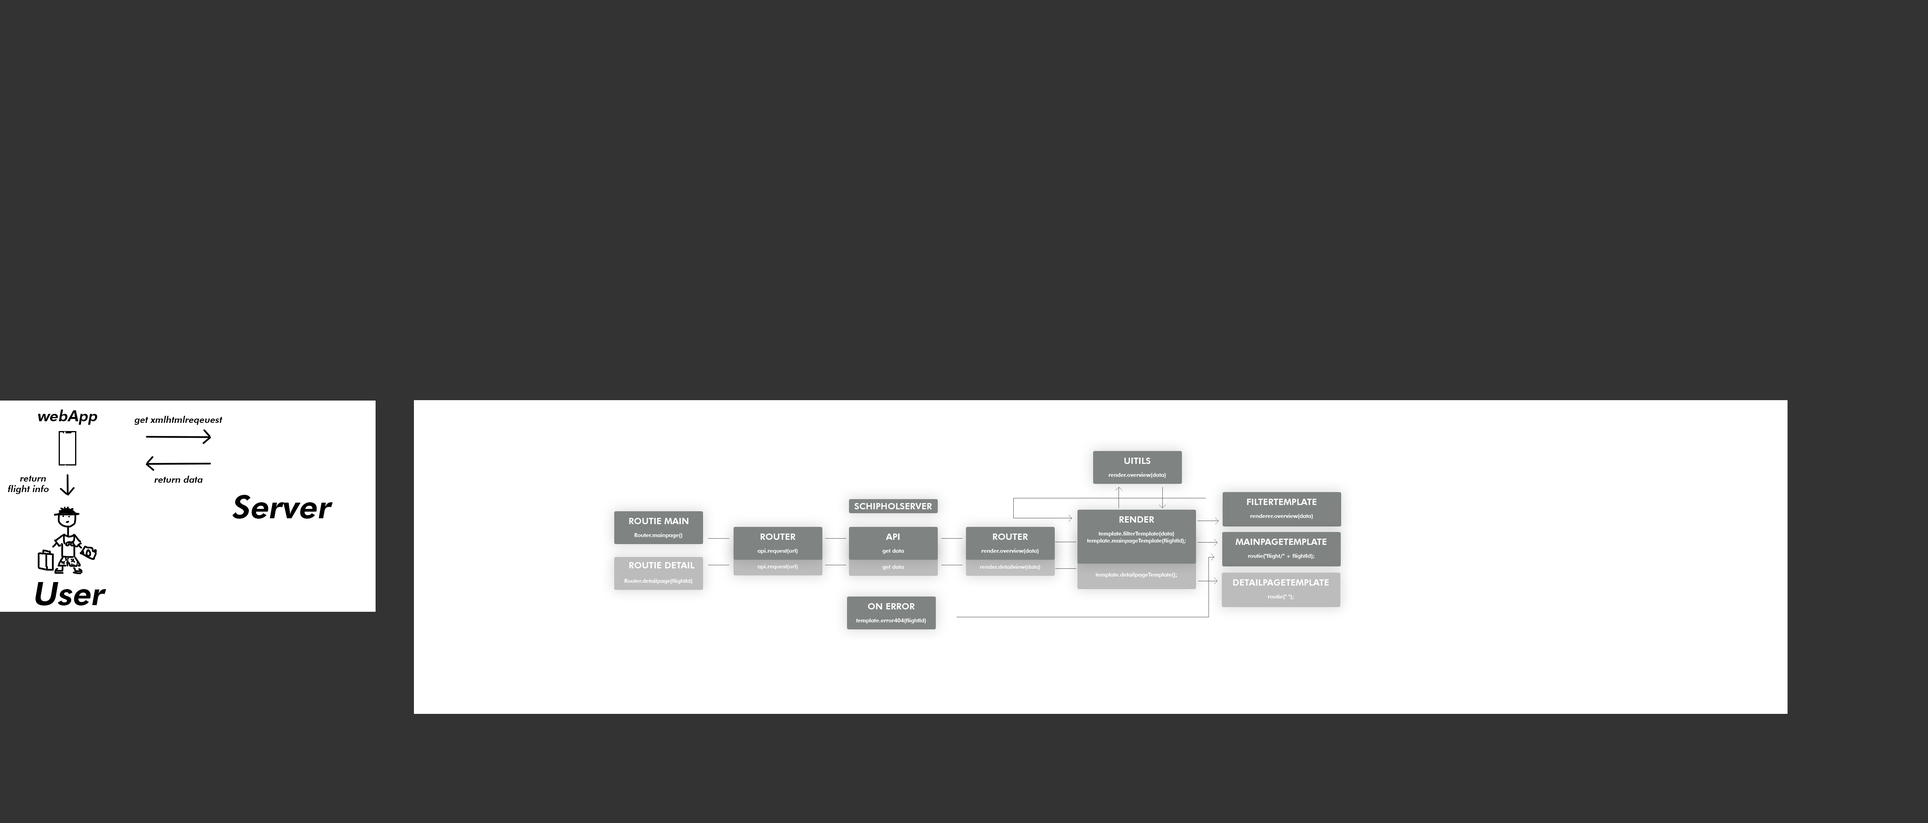
<style>
.page{position:relative;width:1928px;height:823px;background:#333333}
.page>*{position:absolute;margin:0}
.t1{font:15.3px "FuturaBT-Heavy";color:#000000;font-style:italic}
.t2{font:9px "FuturaBT-Heavy";color:#000000;font-style:italic}
.t3{font:9px "FuturaBT-Heavy";color:#ffffff;text-transform:uppercase}
.t4{font:5.5px "FuturaBT-Heavy";color:#ffffff}
.t5{font:32.5px "FuturaBT-Heavy";color:#000000;font-style:italic}
.t6{font:5.5px/7px "FuturaBT-Heavy";color:#ffffff}
</style>
<div class="page">
<p class="t1" style="left:38px;top:410px;width:59px;height:15px">webApp</p>
<p class="t2" style="left:134px;top:416px;width:89px;height:9px">get xmlhtmlreqeuest</p>
<p class="t3" style="left:1124px;top:458px;width:27px;height:6px">uitils</p>
<p class="t4" style="left:1109px;top:473px;width:57px;height:5px">render.overview(data)</p>
<p class="t2" style="left:8px;top:476px;width:41px;height:18px;text-align:right">return <br>flight info</p>
<p class="t2" style="left:154px;top:476px;width:49px;height:7px">return data</p>
<p class="t5" style="left:232px;top:495px;width:101px;height:24px">Server</p>
<p class="t3" style="left:854px;top:503px;width:78px;height:6px">schipholserver</p>
<p class="t3" style="left:1247px;top:499px;width:69px;height:6px">filtertemplate</p>
<p class="t3" style="left:629px;top:518px;width:60px;height:6px">routie main</p>
<p class="t3" style="left:1119px;top:516px;width:35px;height:7px">render</p>
<p class="t4" style="left:1250px;top:514px;width:63px;height:5px">renderer.overview(data)</p>
<p class="t4" style="left:635px;top:533px;width:47px;height:5px">Router.mainpage()</p>
<p class="t3" style="left:761px;top:534px;width:35px;height:6px">router</p>
<p class="t3" style="left:886px;top:534px;width:14px;height:6px">api</p>
<p class="t3" style="left:993px;top:534px;width:35px;height:6px">router</p>
<p class="t6" style="left:1087px;top:531px;width:99px;height:13px;text-align:center">template.filterTemplate(data)<br>template.mainpageTemplate(flightId);</p>
<p class="t3" style="left:1235px;top:539px;width:92px;height:6px">mainpagetemplate</p>
<p class="t4" style="left:757px;top:548px;width:41px;height:6px">api.request(url)</p>
<p class="t4" style="left:882px;top:549px;width:22px;height:5px">get data</p>
<p class="t4" style="left:982px;top:548px;width:57px;height:6px">render.overview(data)</p>
<p class="t4" style="left:1248px;top:554px;width:66px;height:5px">routie("flight/" + flightId);</p>
<p class="t3" style="left:629px;top:562px;width:65px;height:6px">routie detail</p>
<p class="t4" style="left:757px;top:564px;width:41px;height:6px">api.request(url)</p>
<p class="t4" style="left:882px;top:565px;width:22px;height:5px">get data</p>
<p class="t4" style="left:980px;top:565px;width:60px;height:5px">render.detailview(data)</p>
<p class="t4" style="left:624px;top:579px;width:68px;height:5px">Router.detailpage(flightId)</p>
<p class="t4" style="left:1095px;top:572px;width:82px;height:6px">template.detailpageTemplate();</p>
<p class="t3" style="left:1233px;top:579px;width:96px;height:7px">detailpagetemplate</p>
<p class="t5" style="left:35px;top:582px;width:71px;height:24px">User</p>
<p class="t3" style="left:868px;top:603px;width:47px;height:7px">on error</p>
<p class="t4" style="left:1268px;top:594px;width:26px;height:6px">routie(" ");</p>
<p class="t4" style="left:856px;top:618px;width:70px;height:6px">template.error404(flightId)</p>
</div>
